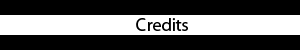
<style>
.page{position:relative;width:300px;height:50px;background:#000000}
.page>*{position:absolute;margin:0}
.t1{font:18px "MyriadPro-Regular";color:#000000}
</style>
<div class="page">
<p class="t1" style="left:136px;top:18px;width:52px;height:13px">Credits</p>
</div>
